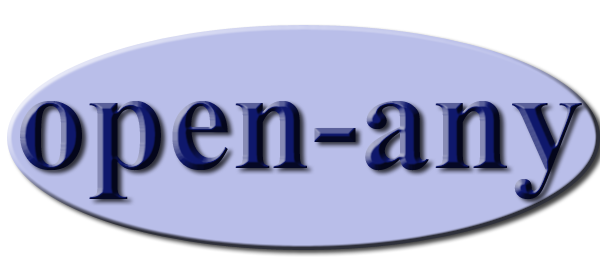
<style>
.page{position:relative;width:600px;height:275px;background:#b9bee9}
.page>*{position:absolute;margin:0}
.t1{font:144px "TimesNewRomanPS-BoldMT"}
</style>
<div class="page">
<p class="t1" style="left:20px;top:101px;width:562px;height:99px">open-any</p>
</div>
